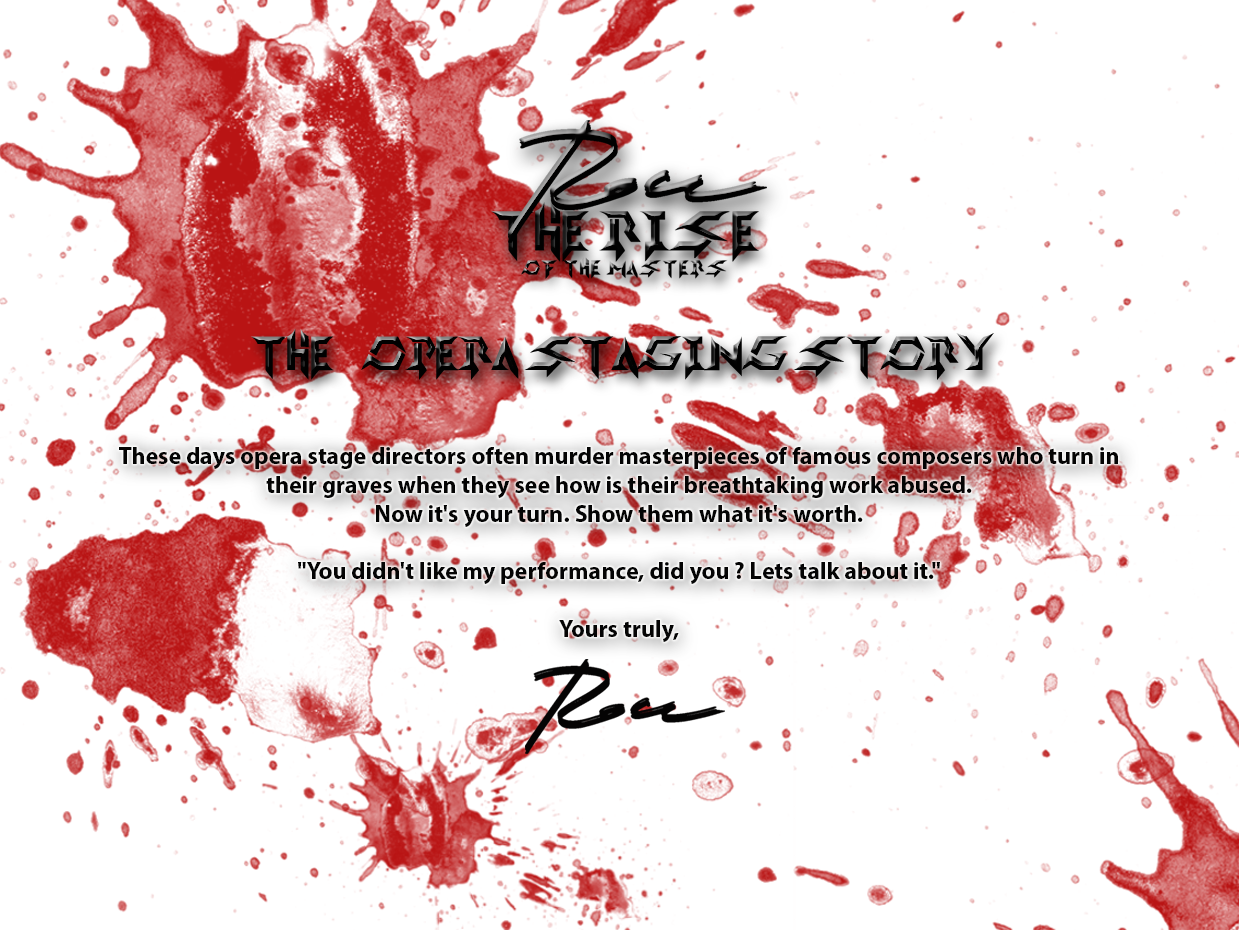
<style>
.page{position:relative;width:1239px;height:930px;background:#ffffff}
.page>*{position:absolute;margin:0}
.t1{font:48px "DeathDevil";letter-spacing:-0.075em;color:#040404}
.t2{font:48px "DeathDevil";letter-spacing:-0.05em;color:#040404}
.t3{font:48px "DeathDevil";letter-spacing:-0.1em;color:#040404}
.t4{font:24px "MyriadPro-Bold";color:#040404}
</style>
<div class="page">
<p class="t1" style="left:250px;top:328px;width:744px;height:52px">T<span class="t2">HE</span> oOPERA <span class="t3">ST</span>AGING <span class="t3">STO</span>RY</p>
<p class="t4" style="left:119px;top:447px;width:999px;height:195px;text-align:center">These days opera stage directors often murder masterpieces of famous composers who turn in their graves when they see how is their breathtaking work abused.<br>Now it's your turn. Show them what it's worth.<br><br>"You didn't like my performance, did you ? Lets talk about it."<br><br>Yours truly,</p>
</div>
